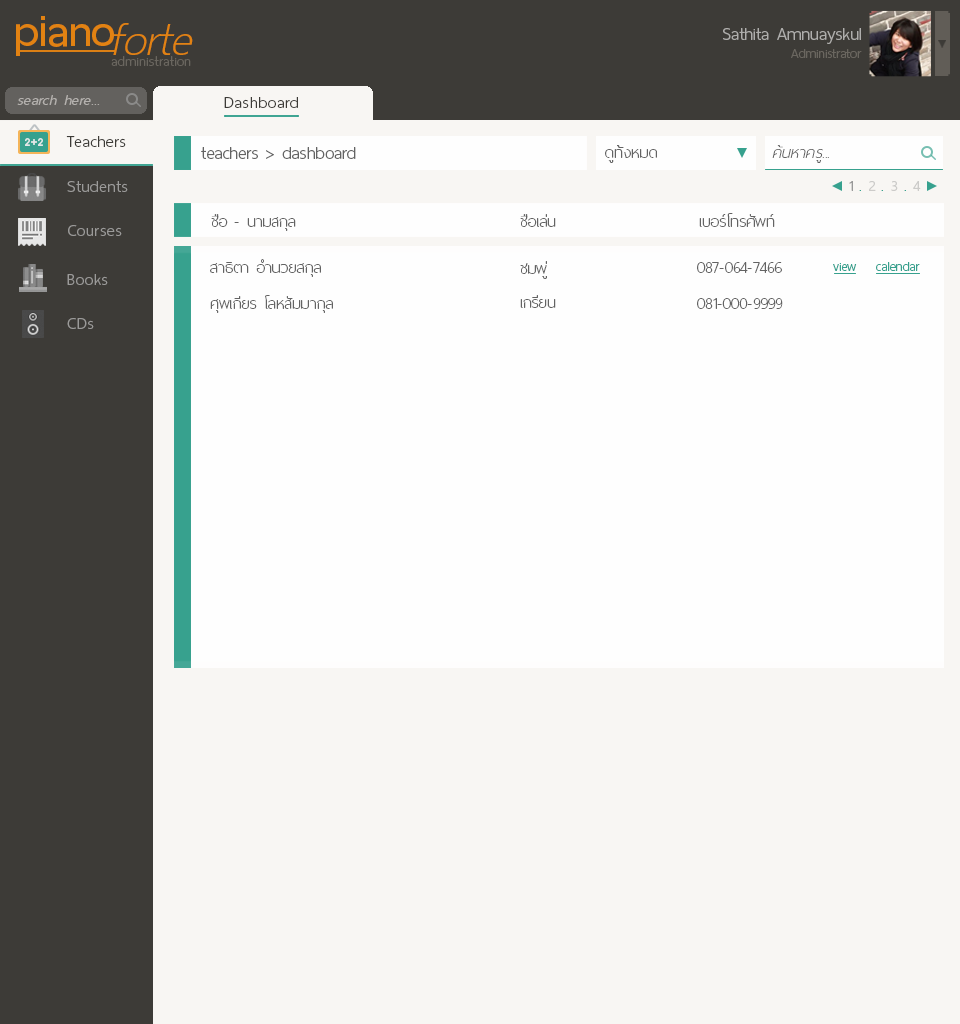
<style>
.page{position:relative;width:960px;height:1024px;background:#f8f6f3}
.page>*{position:absolute;margin:0}
.t1{font:60px "ThaiSansNeue-SemiBold";letter-spacing:-0.005em;color:#e28212}
.t2{font:62px "ThaiSansNeue-ExtraLightItalic";letter-spacing:-0.005em;color:#e28212}
.t3{font:24px "ThaiSansNeue-Light";letter-spacing:-0.005em;color:#afaeac}
.t4{font:18px "ThaiSansNeue-Light";letter-spacing:-0.005em;color:#6a665f}
.t5{font:18.5px "ThaiSansNeue-ExtraLight";letter-spacing:0.025em;color:#6a665f}
.t6{font:20px "ThaiSansNeue-LightItalic";letter-spacing:0.025em;color:#b4b1ae}
.t7{font:22px "ThaiSansNeue-Light";letter-spacing:0.025em;color:#3d3b37}
.t8{font:24px "ThaiSansNeue-Light";letter-spacing:-0.005em;color:#636363}
.t9{font:22px "ThaiSansNeue-UltraLight";letter-spacing:0.01em;color:#636363}
.t10{font:22px "ThaiSansNeue-UltraLightItalic";letter-spacing:0.01em;color:#636363}
.t11{font:22px "ThaiSansNeue-Light";letter-spacing:0.025em;color:#9b9a99}
.t12{font:20px "ThaiSansNeue-Light";color:#989898}
.t13{font:20px "ThaiSansNeue-Light";color:#37a18e}
.t14{font:20px "ThaiSansNeue-Light";color:#cccbc9}
.t15{font:22px "ThaiSansNeue-UltraLight";color:#636363}
.t16{font:18px "ThaiSansNeue-Light";color:#37a18e}
</style>
<div class="page">
<p class="t1" style="left:16px;top:16px;width:98px;height:40px">piano</p>
<p class="t2" style="left:113px;top:23px;width:80px;height:32px">forte</p>
<p class="t3" style="left:723px;top:28px;width:138px;height:16px">Sathita Amnuayskul</p>
<p class="t4" style="left:791px;top:49px;width:71px;height:9px">Administrator</p>
<p class="t5" style="left:111px;top:56px;width:80px;height:10px">administration</p>
<p class="t6" style="left:17px;top:95px;width:83px;height:10px">search here...</p>
<p class="t7" style="left:224px;top:97px;width:74px;height:11px">Dashboard</p>
<p class="t7" style="left:66px;top:136px;width:60px;height:11px">Teachers</p>
<p class="t8" style="left:201px;top:147px;width:155px;height:12px">teachers &gt; dashboard</p>
<p class="t9" style="left:605px;top:145px;width:52px;height:18px">ดูทั้งหมด</p>
<p class="t10" style="left:772px;top:145px;width:57px;height:18px">ค้นหาครู...</p>
<p class="t11" style="left:67px;top:181px;width:61px;height:11px">Students</p>
<p class="t12" style="left:849px;top:181px;width:72px;height:10px">1 <span class="t13">.</span><span class="t14"> 2 </span><span class="t13">.</span><span class="t14"> 3 </span><span class="t13">.</span><span class="t14"> 4</span></p>
<p class="t15" style="left:211px;top:214px;width:85px;height:17px">ชื่อ - นามสกุล</p>
<p class="t15" style="left:520px;top:214px;width:36px;height:13px">ชื่อเล่น</p>
<p class="t15" style="left:699px;top:213px;width:76px;height:14px">เบอร์โทรศัพท์</p>
<p class="t11" style="left:68px;top:225px;width:54px;height:11px">Courses</p>
<p class="t15" style="left:210px;top:259px;width:111px;height:18px">สาธิตา อำนวยสกุล</p>
<p class="t15" style="left:520px;top:261px;width:27px;height:18px">ชมพู่</p>
<p class="t15" style="left:697px;top:262px;width:85px;height:11px">087-064-7466</p>
<p class="t16" style="left:833px;top:263px;width:24px;height:8px">view</p>
<p class="t16" style="left:876px;top:262px;width:44px;height:9px">calendar</p>
<p class="t11" style="left:67px;top:274px;width:41px;height:11px">Books</p>
<p class="t15" style="left:210px;top:295px;width:123px;height:18px">ศุพเกียร โลหสัมมากุล</p>
<p class="t15" style="left:520px;top:295px;width:36px;height:13px">เกรียน</p>
<p class="t15" style="left:697px;top:298px;width:86px;height:11px">081-000-9999</p>
<p class="t11" style="left:67px;top:318px;width:27px;height:11px">CDs</p>
</div>
